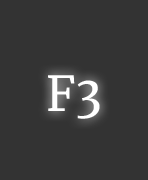
<style>
.page{position:relative;width:148px;height:180px;background:#333333}
.page>*{position:absolute;margin:0}
.t1{font:48px "Merriweather-Regular";color:#ffffff}
</style>
<div class="page">
<p class="t1" style="left:48px;top:75px;width:52px;height:44px">F3</p>
</div>
